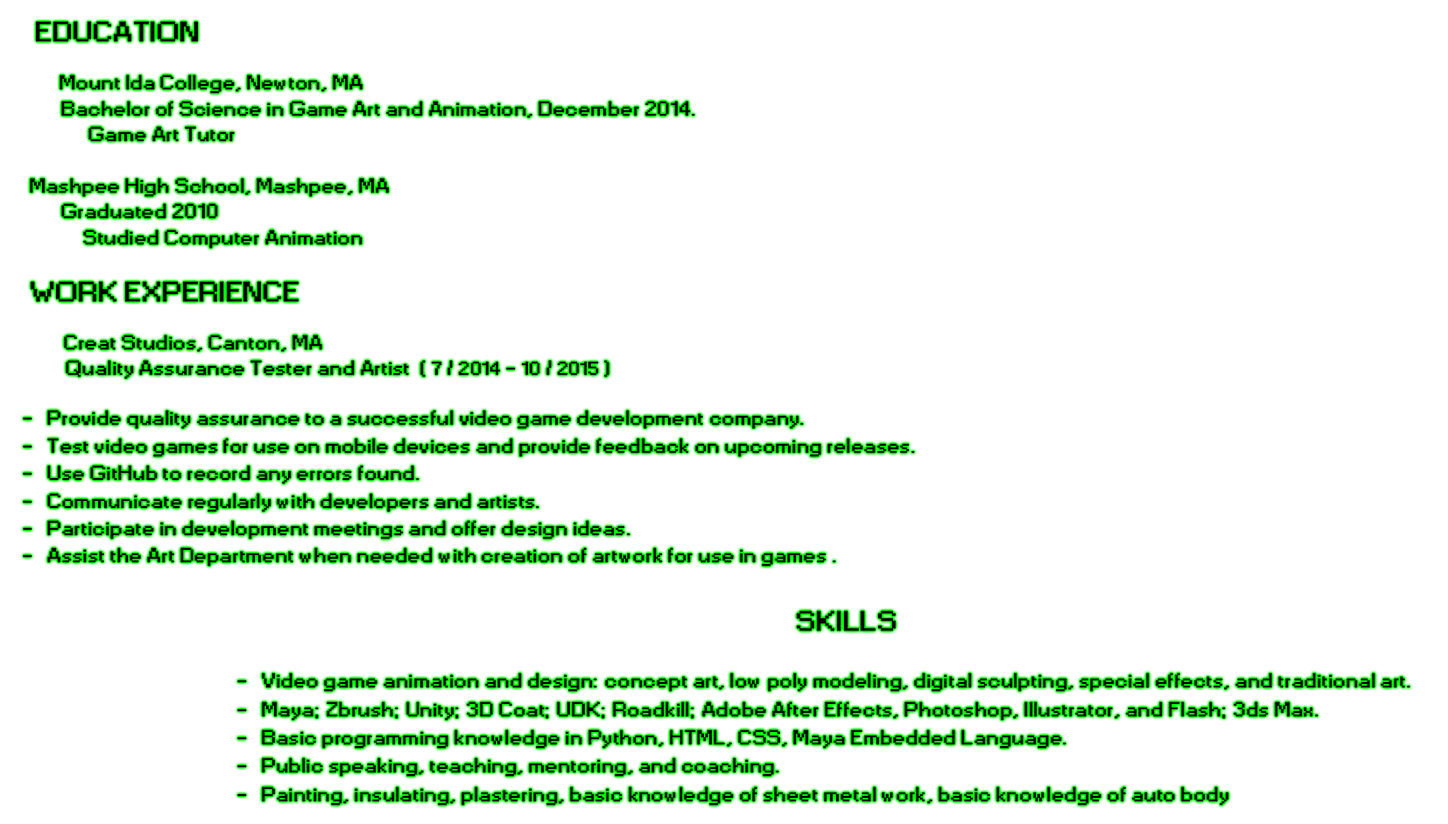
<style>
.page{position:relative;width:1448px;height:824px;background:#ffffff}
.page>*{position:absolute;margin:0}
.t1{font:19.3px "Small Fonts";letter-spacing:0.025em;color:#000000;font-weight:bold;scale:1.33 1}
.t2{font:31.5px "Small Fonts";letter-spacing:0.025em;color:#000000;font-weight:bold;scale:1.33 1}
.t3{font:26.3px "Small Fonts";letter-spacing:0.025em;color:#000000;text-transform:uppercase;font-weight:bold;scale:1.33 1}
.t4{font:17.5px "Small Fonts";letter-spacing:0.025em;color:#000000;font-weight:bold;scale:1.33 1}
</style>
<div class="page">
<p class="t1" style="left:23px;top:21px;width:1387px;height:784px;text-align:center"><span class="t2"><br><br><br>  <br>  </span><span class="t3">Education<br>      <br> </span>       Mount Ida College, Newton, MA<br>       Bachelor of Science in Game Art and Animation, December 2014.<br>              Game Art Tutor<br><br>  Mashpee High School, Mashpee, MA<br>       Graduated 2010<br>          Studied Computer Animation<br><br>  <span class="t3">Work Experience<br>      <br>         </span> Creat Studios, Canton, MA<br>        Quality Assurance Tester and Artist  ( <span class="t4">7</span> / <span class="t4">2014</span> – <span class="t4">10</span> / <span class="t4">2015 </span>)<br>          <br>-   Provide quality assurance to a successful video game development company. <br>-   Test video games for use on mobile devices and provide feedback on upcoming releases.<br>-   Use GitHub to record any errors found.<br>-   Communicate regularly with developers and artists.<br>-   Participate in development meetings and offer design ideas.<br>-   Assist the Art Department when needed with creation of artwork for use in games .<br><span class="t3"><br>                                             Skills<br></span><br>                         -   Video game animation and design: concept art, low poly modeling, digital sculpting, special effects, and traditional art.<br>                         -   Maya; Zbrush; Unity; 3D Coat; UDK; Roadkill; Adobe After Effects, Photoshop, Illustrator, and Flash; 3ds Max.<br>                         -   Basic programming knowledge in Python, HTML, CSS, Maya Embedded Language.<br>                         -   Public speaking, teaching, mentoring, and coaching.<br>                         -   Painting, insulating, plastering, basic knowledge of sheet metal work, basic knowledge of auto body</p>
</div>
